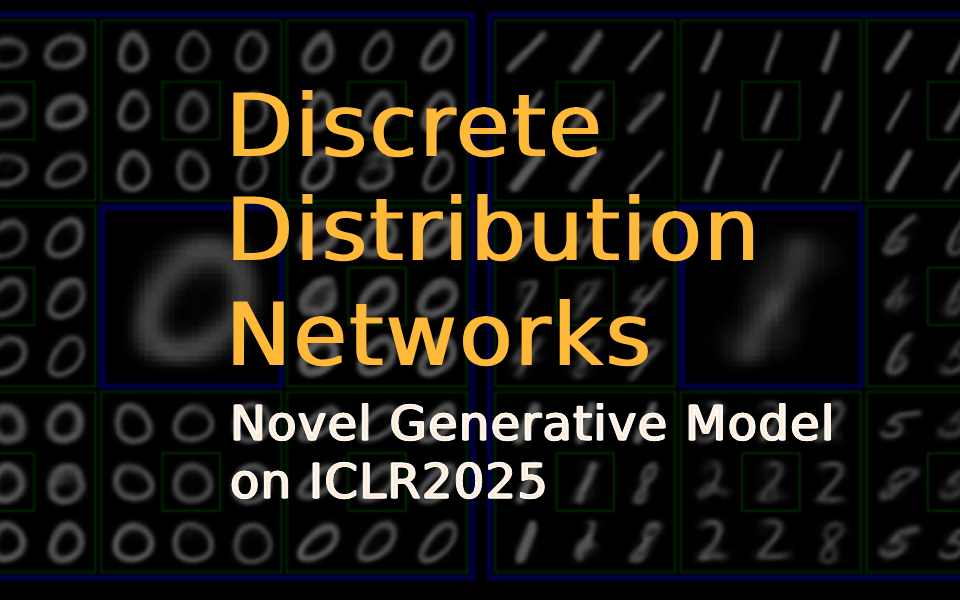
<style>
.page{position:relative;width:960px;height:600px;background:#000000}
.page>*{position:absolute;margin:0}
.t1{font:87px "DejaVuSans";color:#ffb938;font-weight:bold}
.t2{font:48px "DejaVuSans";font-weight:bold}
</style>
<div class="page">
<p class="t1" style="left:233px;top:89px;width:521px;height:278px">Discrete Distribution Networks</p>
<p class="t2" style="left:231px;top:402px;width:601px;height:98px">Novel Generative Model <br>on ICLR2025</p>
</div>
